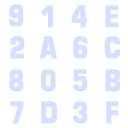
<style>
.page{position:relative;width:128px;height:128px;background:#ffffff}
.page>*{position:absolute;margin:0}
.t1{font:29px "EuropeBold";letter-spacing:0.026em;color:#d5e1ff;font-weight:bold;scale:0.76 1}
</style>
<div class="page">
<p class="t1" style="left:9px;top:4px;width:15px;height:23px">9</p>
<p class="t1" style="left:41px;top:5px;width:12px;height:23px">1</p>
<p class="t1" style="left:71px;top:5px;width:16px;height:23px">4</p>
<p class="t1" style="left:105px;top:5px;width:14px;height:23px">E</p>
<p class="t1" style="left:10px;top:36px;width:15px;height:23px">2</p>
<p class="t1" style="left:39px;top:36px;width:18px;height:23px">A</p>
<p class="t1" style="left:104px;top:36px;width:16px;height:23px">C</p>
<p class="t1" style="left:9px;top:69px;width:15px;height:23px">8</p>
<p class="t1" style="left:41px;top:69px;width:15px;height:23px">0</p>
<p class="t1" style="left:73px;top:69px;width:15px;height:23px">5</p>
<p class="t1" style="left:10px;top:101px;width:14px;height:23px">7</p>
<p class="t1" style="left:73px;top:101px;width:15px;height:23px">3</p>
<p class="t1" style="left:106px;top:101px;width:13px;height:23px">F</p>
</div>
